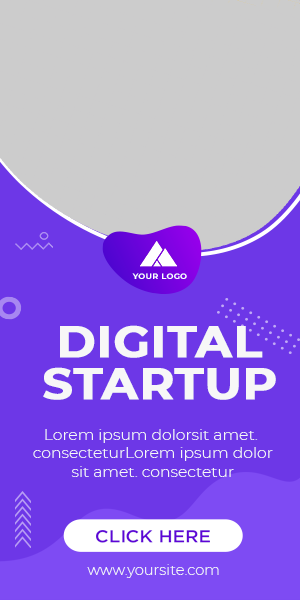
<style>
.page{position:relative;width:300px;height:600px;background:#6d37e7}
.page>*{position:absolute;margin:0}
.t1{font:7.9px "Montserrat-Bold";letter-spacing:0.025em;color:#ffffff;scale:1.04 1}
.t2{font:44.3px/41.7px "Montserrat-Bold";color:#f7f7f7;font-weight:bold;scale:1.06 1}
.t3{font:14.7px/18.4px "Montserrat-Light";color:#f7f7f7;scale:1.06 1}
.t4{font:17.4px "Gotham-Medium";color:#5f04d6;scale:1.07 1}
.t5{font:13.8px "Montserrat-Light";color:#f7f7f7;scale:1.06 1}
</style>
<div class="page">
<p class="t1" style="left:132px;top:273px;width:55px;height:6px">YOUR LOGO</p>
<p class="t2" style="left:43px;top:325px;width:233px;height:75px;text-align:center">DIGITAL<br>STARTUP</p>
<p class="t3" style="left:33px;top:429px;width:240px;height:48px;text-align:center">Lorem ipsum dolorsit amet. <br>consecteturLorem ipsum dolor<br>sit amet. consectetur</p>
<p class="t4" style="left:96px;top:530px;width:114px;height:13px">CLICK HERE</p>
<p class="t5" style="left:87px;top:564px;width:132px;height:14px">www.yoursite.com</p>
</div>
